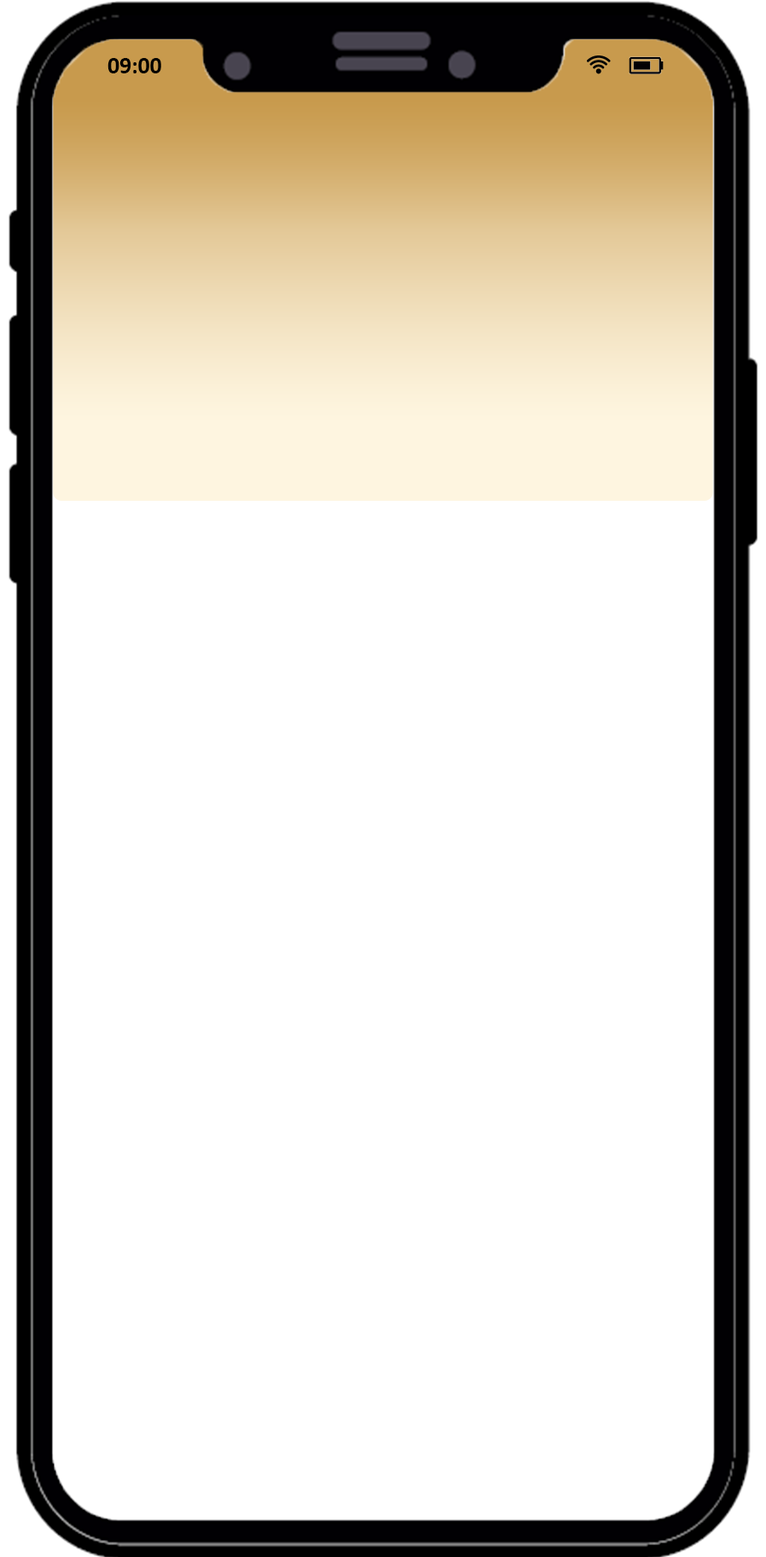
<style>
.page{position:relative;width:766px;height:1557px;background:#ffffff}
.page>*{position:absolute;margin:0}
.t1{font:23.6px "Calibri-Bold";color:#000000}
</style>
<div class="page">
<p class="t1" style="left:107px;top:58px;width:54px;height:15px">09:00</p>
</div>
